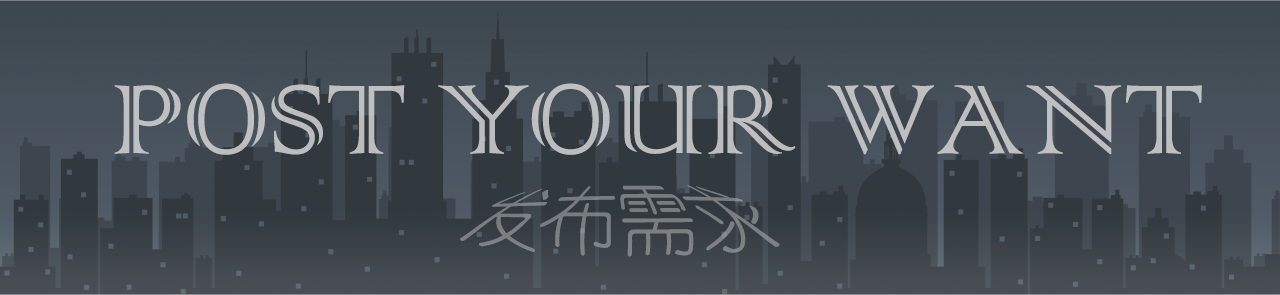
<style>
.page{position:relative;width:1280px;height:295px}
.page>*{position:absolute;margin:0}
.t1{font:130px "ColonnaMT";color:#bec0c1}
.t2{font:60px "YouYuan";color:#7b7e80}
</style>
<div class="page">
<p class="t1" style="left:114px;top:83px;width:1088px;height:72px">POST YOUR WANT</p>
<p class="t2" style="left:460px;top:185px;width:320px;height:72px">发布需求</p>
</div>
